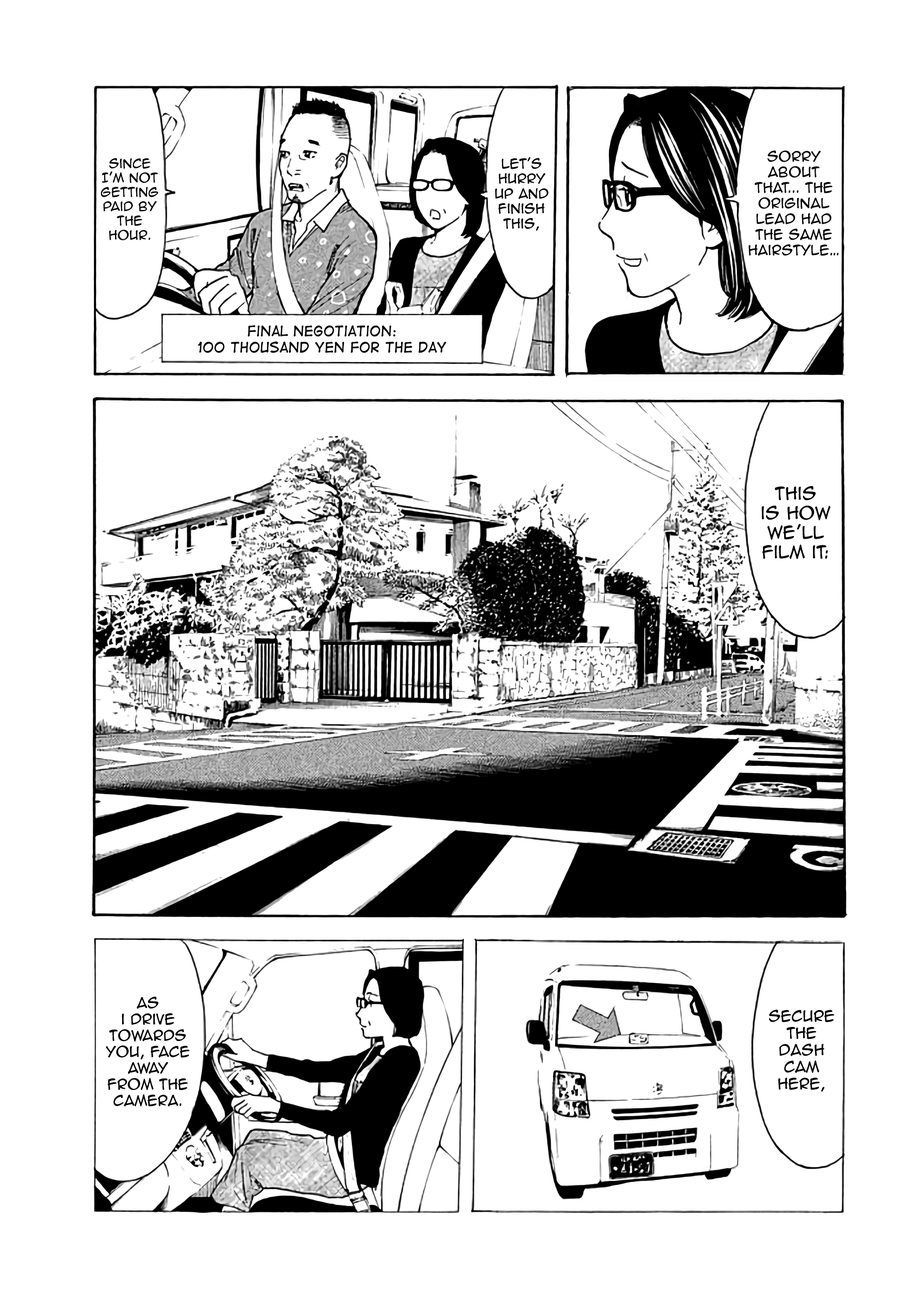
<style>
.page{position:relative;width:916px;height:1302px;background:#ffffff}
.page>*{position:absolute;margin:0}
.t1{font:11.9px "AnimeAce2.0BB";color:#000000}
.t2{font:12.5px "AnimeAce2.0BB";color:#000000}
.t3{font:13px "AnimeAce2.0BB";color:#000000}
.t4{font:13.6px "DigitalStrip";color:#000000}
.t5{font:16.3px "AnimeAce2.0BB";color:#000000}
.t6{font:13.6px "AnimeAce2.0BB";color:#000000}
.t7{font:14.1px "AnimeAce2.0BB";color:#000000}
</style>
<div class="page">
<p class="t1" style="left:101px;top:158px;width:57px;height:82px;text-align:center">Since I'm not getting paid by the hour.</p>
<p class="t2" style="left:495px;top:157px;width:53px;height:74px;text-align:center">Let's hurry up and finish this,</p>
<p class="t3" style="left:748px;top:150px;width:91px;height:106px;text-align:center">sorry about<br>that... the original lead had the same <br>hairstyle…</p>
<p class="t4" style="left:198px;top:325px;width:249px;height:28px;text-align:center">Final negotiation: <br>100 thousand yen for the day</p>
<p class="t5" style="left:761px;top:486px;width:70px;height:73px;text-align:center">This <br>is how we’ll film it:</p>
<p class="t6" style="left:106px;top:997px;width:84px;height:110px;text-align:center">As<br>i drive<br>towards you, face away <br>from the camera.</p>
<p class="t7" style="left:769px;top:1010px;width:65px;height:82px;text-align:center">Secure the dash cam here,</p>
</div>
